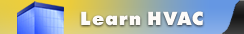
<style>
.page{position:relative;width:244px;height:34px}
.page>*{position:absolute;margin:0}
.t1{font:18px "FuturistExtrabold";letter-spacing:0.06em;color:#fdfbf8}
.t2{font:18px "FuturistExtrabold";letter-spacing:0.075em;color:#fdfbf8}
.t3{font:18px "FuturistExtrabold";letter-spacing:0.05em;color:#fdfbf8}
</style>
<div class="page">
<p class="t1" style="left:81px;top:11px;width:60px;height:15px"><span class="t2">L</span>e<span class="t3">a</span>rn</p>
<p class="t1" style="left:148px;top:11px;width:55px;height:15px">HVAC</p>
</div>
